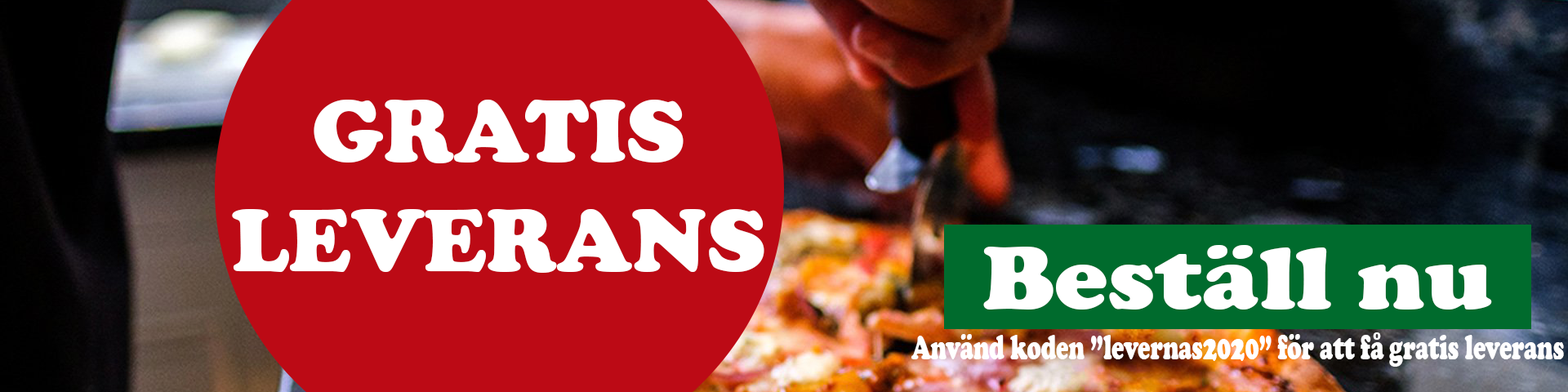
<style>
.page{position:relative;width:1568px;height:392px;background:#bc0a15}
.page>*{position:absolute;margin:0}
.t1{font:91.4px "CooperBlack";color:#ffffff}
.t2{font:91.7px "CooperBlack";color:#ffffff;scale:1.09 1}
.t3{font:36.2px "CooperBlack";color:#ffffff;scale:0.65 1}
</style>
<div class="page">
<p class="t1" style="left:232px;top:100px;width:532px;height:173px;text-align:center">GRATIS<br>LEVERANS</p>
<p class="t2" style="left:983px;top:245px;width:509px;height:65px">Beställ nu</p>
<p class="t3" style="left:911px;top:332px;width:653px;height:35px">Använd koden ”levernas2020” för att få gratis leverans</p>
</div>
